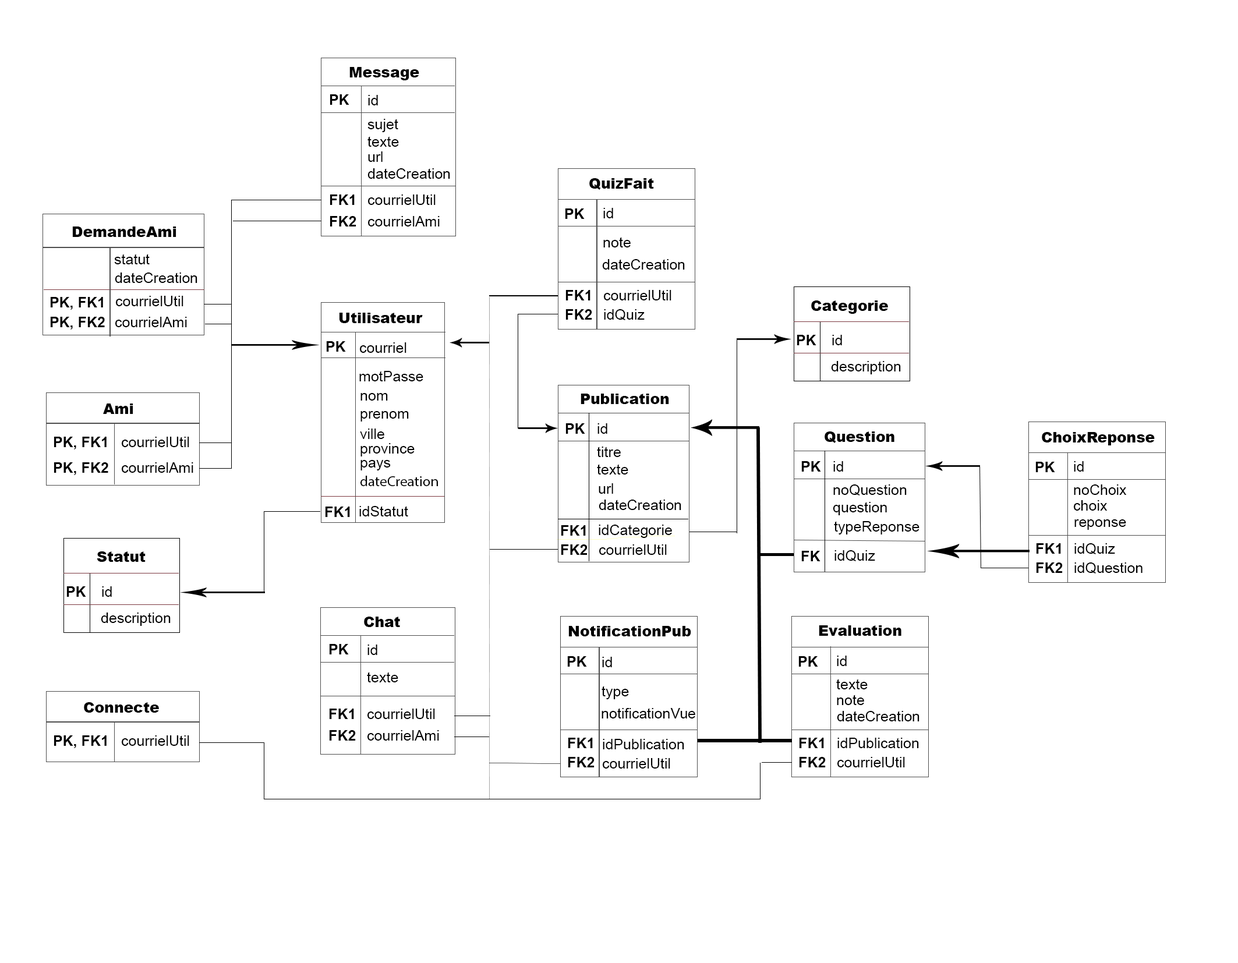
<style>
.page{position:relative;width:1238px;height:963px;background:#ffffff}
.page>*{position:absolute;margin:0}
.t1{font:14.6px "Arial-Black";color:#000000}
.t2{font:14.6px "Arial-BoldMT";color:#000000}
.t3{font:14.6px "ArialMT";color:#000000}
.t4{font:14.6px "MyriadPro-Regular";color:#000000}
</style>
<div class="page">
<p class="t1" style="left:349px;top:67px;width:70px;height:13px">Message</p>
<p class="t2" style="left:330px;top:94px;width:19px;height:11px">PK</p>
<p class="t3" style="left:368px;top:95px;width:10px;height:10px">id</p>
<p class="t3" style="left:367px;top:119px;width:31px;height:13px">sujet</p>
<p class="t3" style="left:367px;top:136px;width:32px;height:11px">texte</p>
<p class="t3" style="left:368px;top:151px;width:15px;height:11px">url</p>
<p class="t3" style="left:367px;top:168px;width:83px;height:11px">dateCreation</p>
<p class="t1" style="left:589px;top:178px;width:65px;height:12px">QuizFait</p>
<p class="t2" style="left:330px;top:194px;width:25px;height:11px">FK1</p>
<p class="t3" style="left:368px;top:194px;width:68px;height:11px">courrielUtil</p>
<p class="t2" style="left:565px;top:208px;width:20px;height:11px">PK</p>
<p class="t3" style="left:603px;top:208px;width:10px;height:10px">id</p>
<p class="t2" style="left:330px;top:216px;width:26px;height:11px">FK2</p>
<p class="t3" style="left:368px;top:216px;width:72px;height:11px">courrielAmi</p>
<p class="t1" style="left:72px;top:227px;width:104px;height:10px">DemandeAmi</p>
<p class="t3" style="left:603px;top:237px;width:28px;height:10px">note</p>
<p class="t3" style="left:114px;top:254px;width:36px;height:10px">statut</p>
<p class="t3" style="left:602px;top:259px;width:83px;height:11px">dateCreation</p>
<p class="t3" style="left:115px;top:273px;width:82px;height:10px">dateCreation</p>
<p class="t2" style="left:565px;top:290px;width:25px;height:10px">FK1</p>
<p class="t3" style="left:604px;top:290px;width:67px;height:10px">courrielUtil</p>
<p class="t2" style="left:50px;top:297px;width:53px;height:13px">PK, FK1</p>
<p class="t3" style="left:116px;top:296px;width:67px;height:10px">courrielUtil</p>
<p class="t1" style="left:811px;top:300px;width:77px;height:14px">Categorie</p>
<p class="t2" style="left:50px;top:317px;width:55px;height:13px">PK, FK2</p>
<p class="t3" style="left:115px;top:317px;width:72px;height:10px">courrielAmi</p>
<p class="t1" style="left:339px;top:313px;width:84px;height:10px">Utilisateur</p>
<p class="t2" style="left:565px;top:309px;width:27px;height:11px">FK2</p>
<p class="t3" style="left:604px;top:309px;width:41px;height:11px">idQuiz</p>
<p class="t2" style="left:326px;top:341px;width:20px;height:11px">PK</p>
<p class="t2" style="left:797px;top:335px;width:19px;height:10px">PK</p>
<p class="t3" style="left:832px;top:335px;width:10px;height:10px">id</p>
<p class="t3" style="left:360px;top:342px;width:46px;height:11px">courriel</p>
<p class="t3" style="left:831px;top:361px;width:70px;height:13px">description</p>
<p class="t3" style="left:359px;top:371px;width:64px;height:10px">motPasse</p>
<p class="t3" style="left:360px;top:393px;width:28px;height:8px">nom</p>
<p class="t1" style="left:581px;top:394px;width:88px;height:10px">Publication</p>
<p class="t1" style="left:103px;top:404px;width:30px;height:10px">Ami</p>
<p class="t3" style="left:360px;top:411px;width:49px;height:11px">prenom</p>
<p class="t2" style="left:565px;top:423px;width:20px;height:11px">PK</p>
<p class="t3" style="left:597px;top:423px;width:10px;height:11px">id</p>
<p class="t2" style="left:54px;top:437px;width:53px;height:13px">PK, FK1</p>
<p class="t3" style="left:122px;top:437px;width:67px;height:10px">courrielUtil</p>
<p class="t3" style="left:360px;top:429px;width:24px;height:10px">ville</p>
<p class="t1" style="left:825px;top:432px;width:69px;height:11px">Question</p>
<p class="t1" style="left:1042px;top:432px;width:113px;height:13px">ChoixReponse</p>
<p class="t3" style="left:360px;top:443px;width:55px;height:14px">province</p>
<p class="t3" style="left:597px;top:447px;width:24px;height:10px">titre</p>
<p class="t3" style="left:360px;top:460px;width:31px;height:11px">pays</p>
<p class="t2" style="left:801px;top:461px;width:20px;height:11px">PK</p>
<p class="t3" style="left:833px;top:461px;width:10px;height:11px">id</p>
<p class="t2" style="left:1035px;top:462px;width:20px;height:10px">PK</p>
<p class="t3" style="left:1074px;top:461px;width:10px;height:11px">id</p>
<p class="t2" style="left:54px;top:462px;width:54px;height:13px">PK, FK2</p>
<p class="t3" style="left:122px;top:462px;width:71px;height:11px">courrielAmi</p>
<p class="t3" style="left:597px;top:464px;width:31px;height:11px">texte</p>
<p class="t4" style="left:360px;top:476px;width:78px;height:10px">dateCreation</p>
<p class="t3" style="left:599px;top:483px;width:14px;height:11px">url</p>
<p class="t3" style="left:833px;top:484px;width:74px;height:12px">noQuestion</p>
<p class="t3" style="left:1074px;top:484px;width:53px;height:11px">noChoix</p>
<p class="t2" style="left:325px;top:507px;width:25px;height:10px">FK1</p>
<p class="t3" style="left:359px;top:506px;width:49px;height:11px">idStatut</p>
<p class="t3" style="left:599px;top:500px;width:82px;height:10px">dateCreation</p>
<p class="t3" style="left:833px;top:502px;width:54px;height:13px">question</p>
<p class="t3" style="left:1074px;top:500px;width:34px;height:11px">choix</p>
<p class="t3" style="left:834px;top:521px;width:85px;height:14px">typeReponse</p>
<p class="t3" style="left:1074px;top:519px;width:52px;height:11px">reponse</p>
<p class="t2" style="left:561px;top:525px;width:25px;height:11px">FK1</p>
<p class="t3" style="left:599px;top:525px;width:73px;height:13px">idCategorie</p>
<p class="t2" style="left:561px;top:544px;width:27px;height:11px">FK2</p>
<p class="t3" style="left:599px;top:544px;width:68px;height:11px">courrielUtil</p>
<p class="t2" style="left:1036px;top:543px;width:25px;height:11px">FK1</p>
<p class="t3" style="left:1074px;top:543px;width:41px;height:11px">idQuiz</p>
<p class="t1" style="left:97px;top:551px;width:49px;height:11px">Statut</p>
<p class="t2" style="left:801px;top:551px;width:19px;height:10px">FK</p>
<p class="t3" style="left:834px;top:550px;width:41px;height:11px">idQuiz</p>
<p class="t2" style="left:1036px;top:563px;width:27px;height:10px">FK2</p>
<p class="t3" style="left:1074px;top:563px;width:69px;height:11px">idQuestion</p>
<p class="t2" style="left:66px;top:586px;width:20px;height:11px">PK</p>
<p class="t3" style="left:102px;top:586px;width:10px;height:11px">id</p>
<p class="t3" style="left:101px;top:613px;width:70px;height:13px">description</p>
<p class="t1" style="left:364px;top:617px;width:36px;height:10px">Chat</p>
<p class="t1" style="left:568px;top:626px;width:123px;height:10px">NotificationPub</p>
<p class="t1" style="left:819px;top:625px;width:82px;height:11px">Evaluation</p>
<p class="t2" style="left:329px;top:644px;width:20px;height:11px">PK</p>
<p class="t3" style="left:367px;top:645px;width:10px;height:10px">id</p>
<p class="t2" style="left:567px;top:656px;width:20px;height:11px">PK</p>
<p class="t3" style="left:602px;top:657px;width:10px;height:10px">id</p>
<p class="t2" style="left:798px;top:656px;width:20px;height:11px">PK</p>
<p class="t3" style="left:837px;top:656px;width:10px;height:10px">id</p>
<p class="t3" style="left:367px;top:672px;width:31px;height:10px">texte</p>
<p class="t3" style="left:602px;top:686px;width:27px;height:13px">type</p>
<p class="t3" style="left:836px;top:679px;width:32px;height:10px">texte</p>
<p class="t3" style="left:837px;top:695px;width:27px;height:10px">note</p>
<p class="t1" style="left:84px;top:702px;width:75px;height:11px">Connecte</p>
<p class="t2" style="left:329px;top:709px;width:25px;height:10px">FK1</p>
<p class="t3" style="left:367px;top:709px;width:68px;height:10px">courrielUtil</p>
<p class="t3" style="left:602px;top:708px;width:93px;height:11px">notificationVue</p>
<p class="t3" style="left:837px;top:711px;width:82px;height:11px">dateCreation</p>
<p class="t2" style="left:54px;top:735px;width:53px;height:13px">PK, FK1</p>
<p class="t3" style="left:122px;top:735px;width:67px;height:11px">courrielUtil</p>
<p class="t2" style="left:329px;top:730px;width:27px;height:11px">FK2</p>
<p class="t3" style="left:367px;top:730px;width:72px;height:11px">courrielAmi</p>
<p class="t2" style="left:568px;top:738px;width:25px;height:10px">FK1</p>
<p class="t2" style="left:799px;top:738px;width:25px;height:10px">FK1</p>
<p class="t3" style="left:837px;top:738px;width:82px;height:10px">idPublication</p>
<p class="t3" style="left:603px;top:739px;width:81px;height:10px">idPublication</p>
<p class="t2" style="left:568px;top:757px;width:27px;height:11px">FK2</p>
<p class="t3" style="left:603px;top:758px;width:67px;height:11px">courrielUtil</p>
<p class="t2" style="left:799px;top:757px;width:27px;height:11px">FK2</p>
<p class="t3" style="left:837px;top:757px;width:68px;height:11px">courrielUtil</p>
</div>
